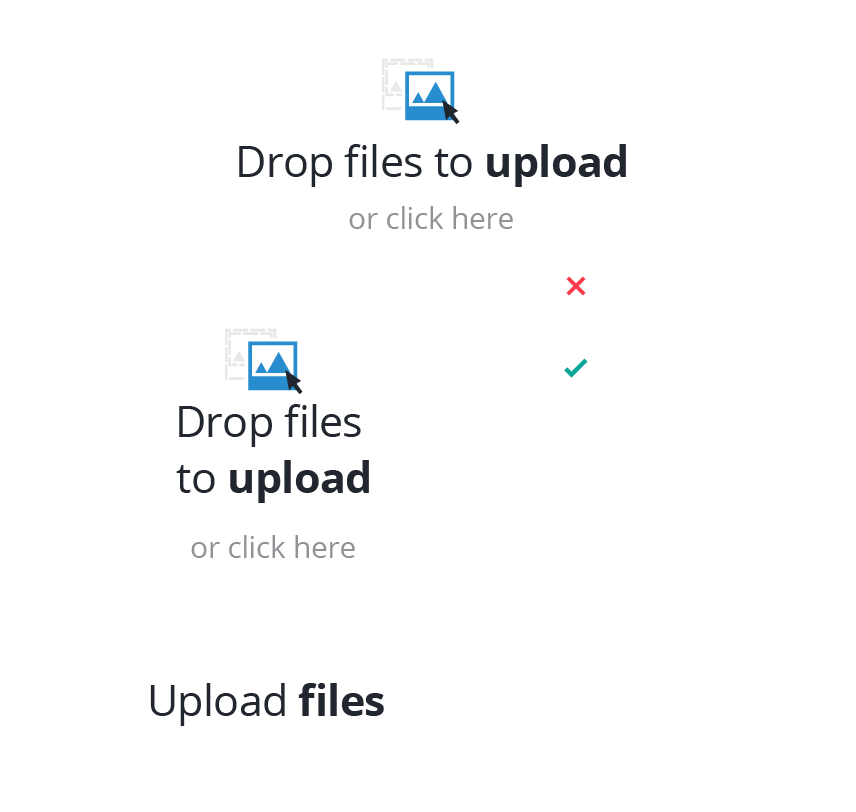
<style>
.page{position:relative;width:856px;height:812px;background:#ffffff}
.page>*{position:absolute;margin:0}
.t1{font:42.6px "OpenSans";letter-spacing:-0.01em;color:#22262e}
.t2{font:42.6px "OpenSans-Bold";letter-spacing:-0.01em;color:#22262e}
.t3{font:30px "OpenSans";letter-spacing:-0.01em;color:#909296}
.t4{font:42.6px/56.2px "OpenSans";letter-spacing:-0.01em;color:#22262e}
.t5{font:42.6px/56.2px "OpenSans-Bold";letter-spacing:-0.01em;color:#22262e}
</style>
<div class="page">
<p class="t1" style="left:239px;top:144px;width:387px;height:43px">Drop files to <span class="t2">upload</span></p>
<p class="t3" style="left:349px;top:206px;width:164px;height:23px">or click here</p>
<p class="t4" style="left:176px;top:404px;width:193px;height:99px;text-align:center">Drop files <br>to <span class="t5">upload</span></p>
<p class="t3" style="left:191px;top:535px;width:164px;height:23px">or click here</p>
<p class="t1" style="left:150px;top:683px;width:234px;height:43px">Upload<span class="t2"> files</span></p>
</div>
